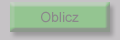
<style>
.page{position:relative;width:120px;height:40px;background:#94c591}
.page>*{position:absolute;margin:0}
.t1{font:14px "ArialMT";color:#8b898b}
</style>
<div class="page">
<p class="t1" style="left:41px;top:11px;width:38px;height:12px">Oblicz</p>
</div>
